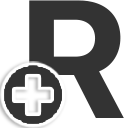
<style>
.page{position:relative;width:128px;height:128px;background:#ffffff}
.page>*{position:absolute;margin:0}
.t1{font:166.8px "SFProText-Bold";color:#333333}
</style>
<div class="page">
<p class="t1" style="left:29px;top:0px;width:95px;height:118px">R</p>
</div>
